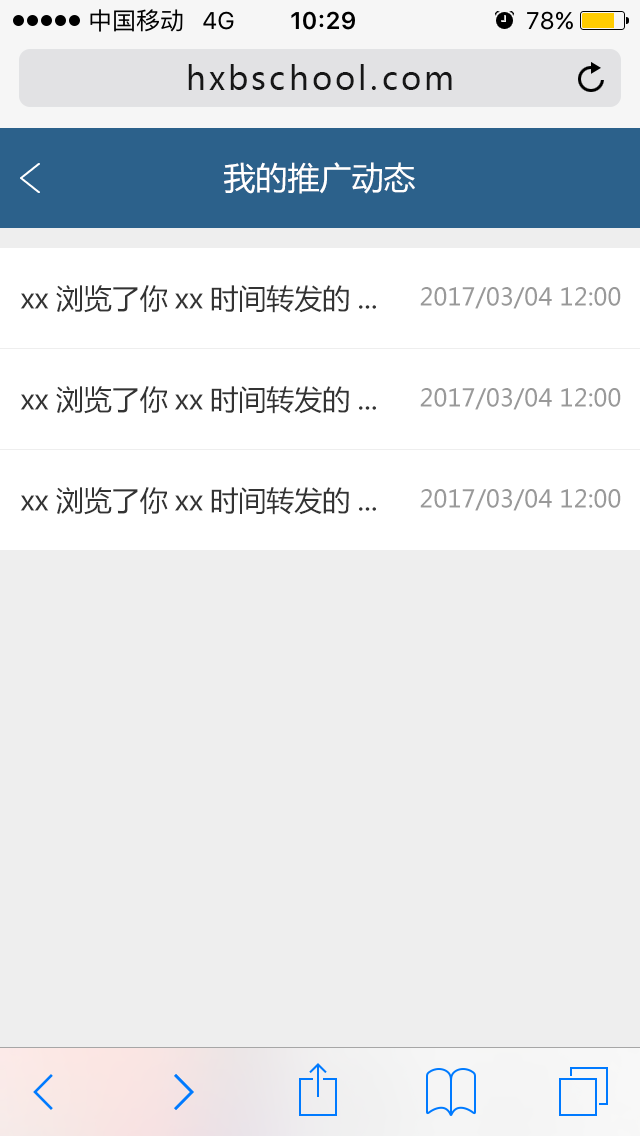
<style>
.page{position:relative;width:640px;height:1136px;background:#eeeeee}
.page>*{position:absolute;margin:0}
.t1{font:32px "MicrosoftYaHei";letter-spacing:0.1em;color:#171717}
.t2{font:32px "MicrosoftYaHei";color:#ffffff}
.t3{font:28px "MicrosoftYaHei";color:#333333}
.t4{font:24px "MicrosoftYaHei";color:#999999}
</style>
<div class="page">
<p class="t1" style="left:188px;top:64px;width:264px;height:26px">hxbschool.com</p>
<p class="t2" style="left:224px;top:162px;width:191px;height:32px">我的推广动态</p>
<p class="t3" style="left:20px;top:285px;width:356px;height:28px">xx浏览了你xx时间转发的...</p>
<p class="t4" style="left:420px;top:287px;width:201px;height:22px">2017/03/04 12:00</p>
<p class="t3" style="left:20px;top:386px;width:356px;height:28px">xx浏览了你xx时间转发的...</p>
<p class="t4" style="left:420px;top:388px;width:201px;height:22px">2017/03/04 12:00</p>
<p class="t3" style="left:20px;top:487px;width:356px;height:28px">xx浏览了你xx时间转发的...</p>
<p class="t4" style="left:420px;top:489px;width:201px;height:22px">2017/03/04 12:00</p>
</div>
